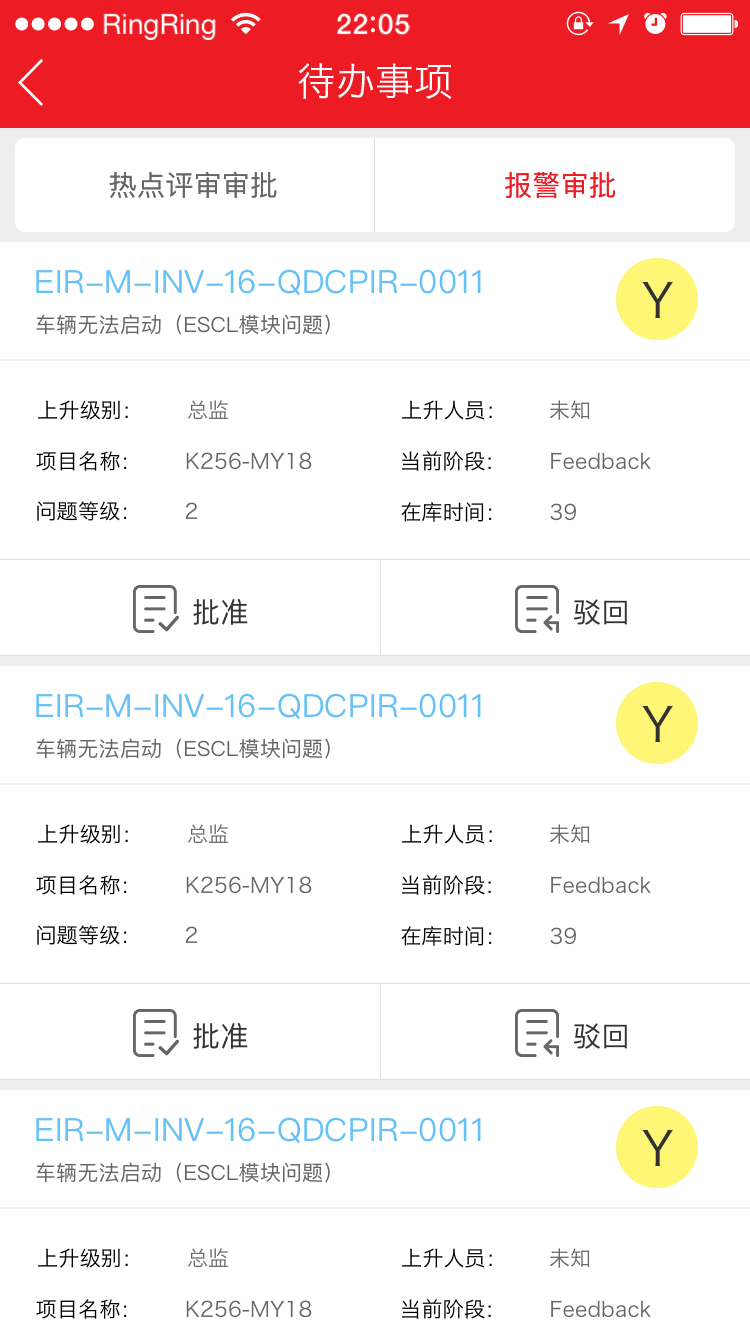
<style>
.page{position:relative;width:750px;height:1334px;background:#ffffff}
.page>*{position:absolute;margin:0}
.t1{font:28.1px "HelveticaNeue";color:#ffffff}
.t2{font:28.1px "HelveticaNeue-Medium";letter-spacing:0.03em;color:#ffffff}
.t3{font:38.7px "HiraginoSansGB-W3";letter-spacing:0.01em;color:#ffffff}
.t4{font:28px "PingFang-SC-Medium";letter-spacing:0.01em;color:#666666}
.t5{font:28px "PingFang-SC-Medium";letter-spacing:0.01em;color:#ed1c24}
.t6{font:32px "PingFangSC-Regular";letter-spacing:0.01em;color:#66c2f6}
.t7{font:45.8px "HiraginoSansGB-W3";letter-spacing:0.01em;color:#333333}
.t8{font:21px "PingFangSC-Regular";letter-spacing:0.01em;color:#666666}
.t9{font:21px "HiraginoSansGB-W3";letter-spacing:0.01em;color:#000000}
.t10{font:21px "HiraginoSansGB-W3";letter-spacing:0.01em;color:#666666}
.t11{font:28px "PingFangSC-Regular";letter-spacing:0.01em;color:#333333}
</style>
<div class="page">
<p class="t1" style="left:103px;top:13px;width:113px;height:27px">RingRing</p>
<p class="t2" style="left:337px;top:13px;width:73px;height:22px">22 05</p>
<p class="t3" style="left:298px;top:63px;width:154px;height:36px">待办事项</p>
<p class="t4" style="left:109px;top:171px;width:168px;height:27px">热点评审审批</p>
<p class="t5" style="left:505px;top:171px;width:110px;height:27px">报警审批</p>
<p class="t6" style="left:36px;top:269px;width:445px;height:27px">EIR-M-INV-16-QDCPIR-0011</p>
<p class="t7" style="left:642px;top:282px;width:31px;height:36px">Y</p>
<p class="t8" style="left:36px;top:314px;width:294px;height:21px">车辆无法启动（ESCL模块问题）</p>
<p class="t9" style="left:38px;top:400px;width:90px;height:20px">上升级别：</p>
<p class="t10" style="left:188px;top:400px;width:40px;height:20px">总监</p>
<p class="t9" style="left:402px;top:400px;width:90px;height:20px">上升人员：</p>
<p class="t10" style="left:550px;top:400px;width:40px;height:20px">未知</p>
<p class="t10" style="left:36px;top:451px;width:276px;height:20px"><span class="t9">项目名称：      </span>K256-MY18</p>
<p class="t10" style="left:402px;top:451px;width:249px;height:20px"><span class="t9">当前阶段：      </span>Feedback</p>
<p class="t9" style="left:37px;top:501px;width:160px;height:20px">问题等级：     <span class="t10"> 2</span></p>
<p class="t9" style="left:401px;top:502px;width:175px;height:20px">在库时间：     <span class="t10"> 39</span></p>
<p class="t11" style="left:193px;top:599px;width:55px;height:26px">批准</p>
<p class="t11" style="left:573px;top:599px;width:54px;height:26px">驳回</p>
<p class="t6" style="left:36px;top:693px;width:445px;height:27px">EIR-M-INV-16-QDCPIR-0011</p>
<p class="t7" style="left:642px;top:706px;width:31px;height:36px">Y</p>
<p class="t8" style="left:36px;top:738px;width:294px;height:21px">车辆无法启动（ESCL模块问题）</p>
<p class="t9" style="left:38px;top:824px;width:90px;height:20px">上升级别：</p>
<p class="t10" style="left:188px;top:824px;width:40px;height:20px">总监</p>
<p class="t9" style="left:402px;top:824px;width:90px;height:20px">上升人员：</p>
<p class="t10" style="left:550px;top:824px;width:40px;height:20px">未知</p>
<p class="t10" style="left:36px;top:875px;width:276px;height:20px"><span class="t9">项目名称：      </span>K256-MY18</p>
<p class="t10" style="left:402px;top:875px;width:249px;height:20px"><span class="t9">当前阶段：      </span>Feedback</p>
<p class="t9" style="left:37px;top:925px;width:160px;height:20px">问题等级：     <span class="t10"> 2</span></p>
<p class="t9" style="left:401px;top:926px;width:175px;height:20px">在库时间：     <span class="t10"> 39</span></p>
<p class="t11" style="left:193px;top:1023px;width:55px;height:26px">批准</p>
<p class="t11" style="left:573px;top:1023px;width:54px;height:26px">驳回</p>
<p class="t6" style="left:36px;top:1117px;width:445px;height:27px">EIR-M-INV-16-QDCPIR-0011</p>
<p class="t7" style="left:642px;top:1130px;width:31px;height:36px">Y</p>
<p class="t8" style="left:36px;top:1162px;width:294px;height:21px">车辆无法启动（ESCL模块问题）</p>
<p class="t9" style="left:38px;top:1248px;width:90px;height:20px">上升级别：</p>
<p class="t10" style="left:188px;top:1248px;width:40px;height:20px">总监</p>
<p class="t9" style="left:402px;top:1248px;width:90px;height:20px">上升人员：</p>
<p class="t10" style="left:550px;top:1248px;width:40px;height:20px">未知</p>
<p class="t10" style="left:36px;top:1299px;width:276px;height:20px"><span class="t9">项目名称：      </span>K256-MY18</p>
<p class="t10" style="left:402px;top:1299px;width:249px;height:20px"><span class="t9">当前阶段：      </span>Feedback</p>
</div>
